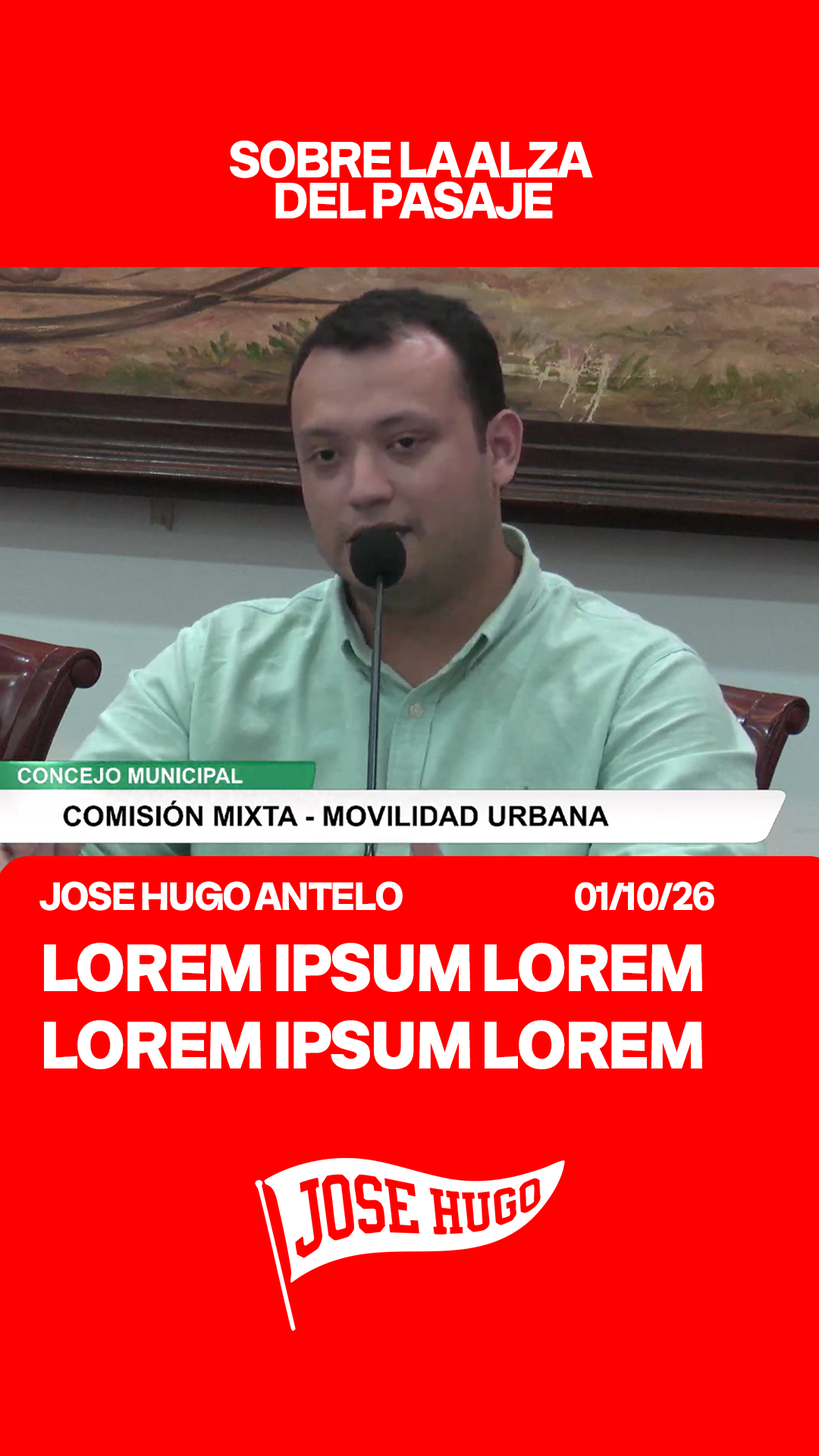
<style>
.page{position:relative;width:819px;height:1456px;background:#ff0000}
.page>*{position:absolute;margin:0}
.t1{font:54.2px/40.9px "BastardoGrotesk-Bold";letter-spacing:-0.05em;color:#ffffff;scale:0.91 1}
.t2{font:41.7px "BastardoGrotesk-Bold";letter-spacing:-0.05em;color:#ffffff;scale:0.91 1}
.t3{font:70.9px "BastardoGrotesk-Black";letter-spacing:-0.05em;color:#ffffff;scale:0.91 1}
</style>
<div class="page">
<p class="t1" style="left:230px;top:140px;width:363px;height:79px;text-align:center">SOBRE LA ALZA<br> DEL PASAJE</p>
<p class="t2" style="left:39px;top:881px;width:364px;height:30px">JOSE HUGO ANTELO</p>
<p class="t2" style="left:575px;top:881px;width:139px;height:30px">01/10/26</p>
<p class="t3" style="left:44px;top:943px;width:658px;height:126px">LOREM IPSUM LOREM<br>LOREM IPSUM LOREM</p>
</div>
